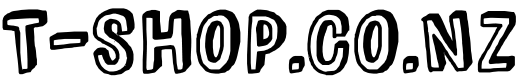
<style>
.page{position:relative;width:518px;height:84px;background:#ffffff}
.page>*{position:absolute;margin:0}
.t1{font:104px "ComicZineOT";color:#000000}
</style>
<div class="page">
<p class="t1" style="left:2px;top:8px;width:514px;height:68px">T-SHOP.CO.NZ</p>
</div>
